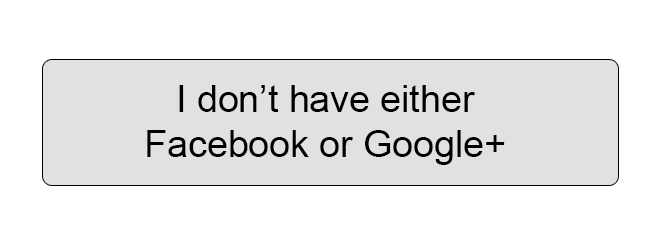
<style>
.page{position:relative;width:650px;height:247px;background:#ffffff}
.page>*{position:absolute;margin:0}
.t1{font:37.5px "ArialMT";color:#000000}
</style>
<div class="page">
<p class="t1" style="left:147px;top:85px;width:358px;height:80px;text-align:center">I don’t have either<br>Facebook or Google+</p>
</div>
